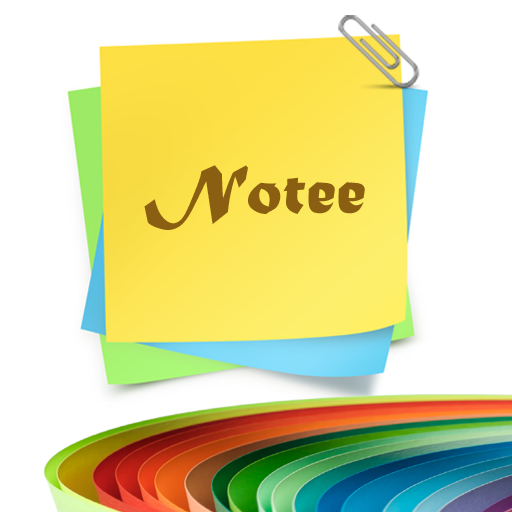
<style>
.page{position:relative;width:512px;height:512px;background:#ffffff}
.page>*{position:absolute;margin:0}
.t1{font:72px "MaturaMTScriptCapitals";color:#8b5f11}
</style>
<div class="page">
<p class="t1" style="left:144px;top:165px;width:221px;height:65px">Notee</p>
</div>
